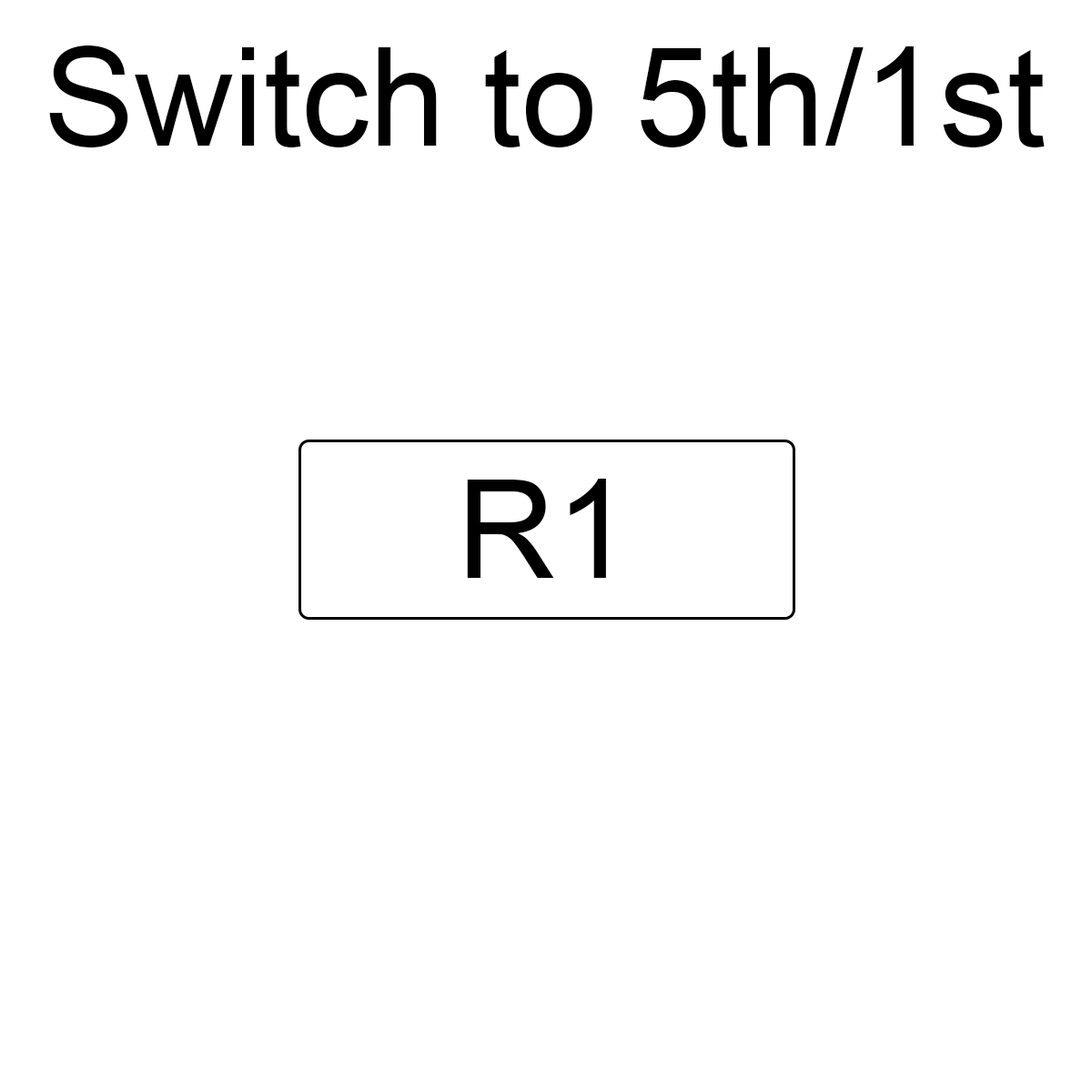
<style>
.page{position:relative;width:1092px;height:1092px;background:#ffffff}
.page>*{position:absolute;margin:0}
.t1{font:136.5px "ArialMT";color:#000000}
</style>
<div class="page">
<p class="t1" style="left:49px;top:45px;width:996px;height:102px">Switch to 5th/1st</p>
<p class="t1" style="left:467px;top:479px;width:139px;height:99px">R1</p>
</div>
